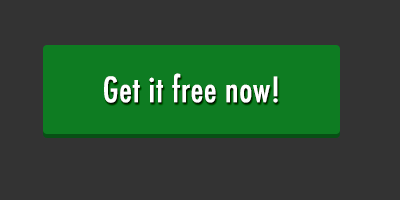
<style>
.page{position:relative;width:400px;height:200px;background:#333333}
.page>*{position:absolute;margin:0}
.t1{font:34px "Futura-CondensedMedium";letter-spacing:0.02em;color:#ffffff}
</style>
<div class="page">
<p class="t1" style="left:104px;top:73px;width:174px;height:30px">Get it free now!</p>
</div>
